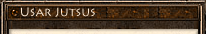
<style>
.page{position:relative;width:206px;height:34px}
.page>*{position:absolute;margin:0}
.t1{font:12px "LithosPro-Regular";color:#fcead6}
</style>
<div class="page">
<p class="t1" style="left:21px;top:7px;width:74px;height:10px">Usar Jutsus</p>
</div>
